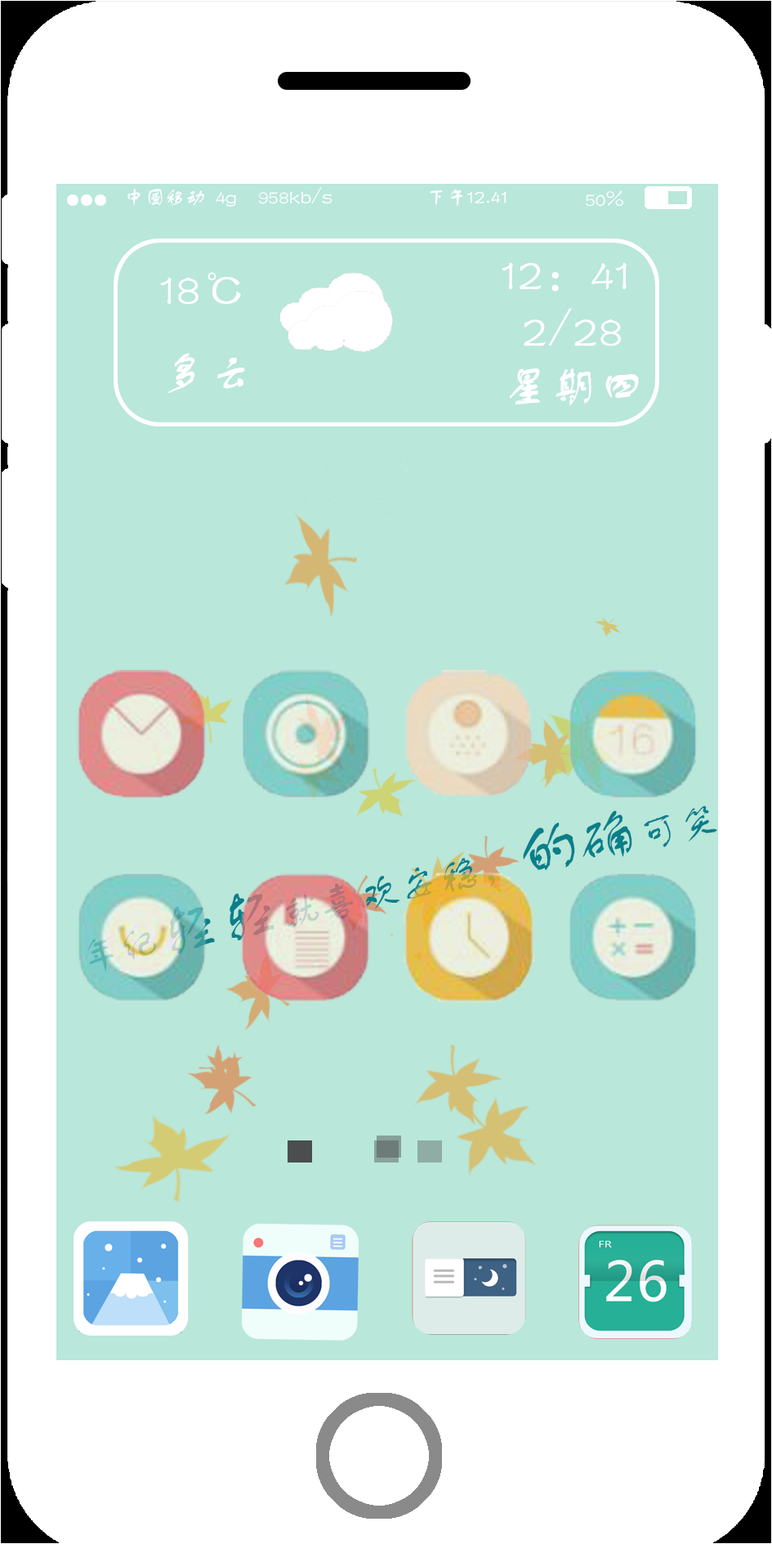
<style>
.page{position:relative;width:772px;height:1544px;background:#b9e7da}
.page>*{position:absolute;margin:0}
.t1{font:47.7px "FZSTK--GBK1-0";color:#ffffff}
.t2{font:40.9px "FZSTK--GBK1-0"}
.t3{font:61.3px "FZSTK--GBK1-0"}
</style>
<div class="page">
<p class="t1" style="left:502px;top:262px;width:125px;height:30px">12：41</p>
<p class="t1" style="left:160px;top:272px;width:85px;height:122px">18℃<br>多云</p>
<p class="t1" style="left:524px;top:308px;width:97px;height:38px">2/28</p>
<p class="t1" style="left:510px;top:368px;width:129px;height:38px">星期四</p>
<p class="t2" style="left:87px;top:806px;width:630px;height:166px;rotate:-12deg">年纪<span class="t3">轻轻</span>就喜欢安稳，<span class="t3">的确</span>可笑</p>
</div>
